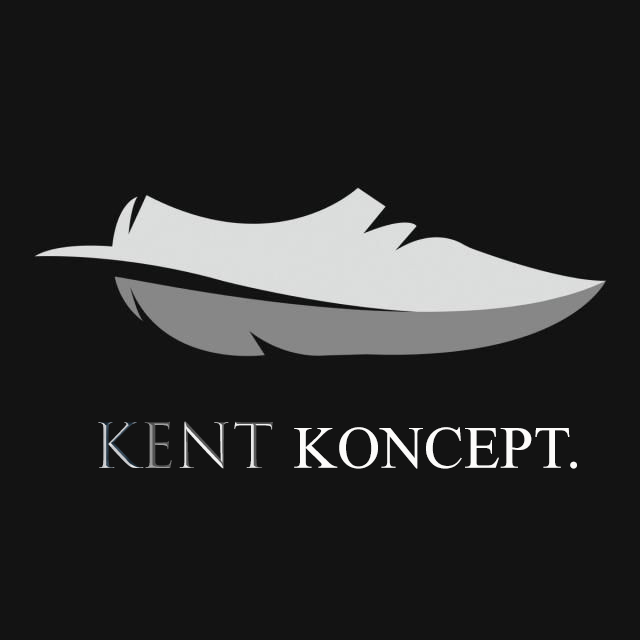
<style>
.page{position:relative;width:640px;height:640px;background:#131313}
.page>*{position:absolute;margin:0}
.t1{font:60px "TimesNewRomanPSMT";color:#fcfbfa}
.t2{font:60px "TrajanColor-Concept";color:#c0bbb8}
</style>
<div class="page">
<p class="t1" style="left:98px;top:421px;width:479px;height:48px"><span class="t2">KENT </span>KONCEPT.</p>
</div>
